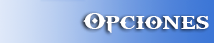
<style>
.page{position:relative;width:214px;height:43px}
.page>*{position:absolute;margin:0}
.t1{font:26px "GodOfWar";color:#ffffff}
</style>
<div class="page">
<p class="t1" style="left:83px;top:13px;width:126px;height:20px">Opciones</p>
</div>
